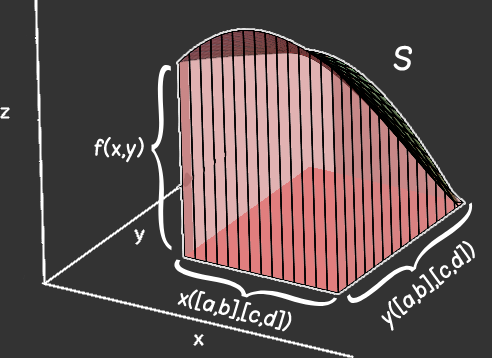
<style>
.page{position:relative;width:492px;height:358px;background:#333333}
.page>*{position:absolute;margin:0}
.t1{font:24px "Blokletters-Viltstift";color:#ffffff}
.t2{font:207.1px "BluuNext-Titling";color:#ffffff;scale:0.5 1}
.t3{font:17px "Blokletters-Viltstift";color:#ffffff}
.t4{font:176px "BluuNext-Titling";color:#ffffff;scale:0.58 1}
.t5{font:186.2px "BluuNext-Titling";color:#ffffff;scale:0.55 1}
</style>
<div class="page">
<p class="t1" style="left:393px;top:45px;width:20px;height:26px">S</p>
<p class="t2" style="left:151px;top:65px;width:21px;height:186px;rotate:28deg">{</p>
<p class="t3" style="left:94px;top:136px;width:50px;height:27px">f(x,y)</p>
<p class="t4" style="left:346px;top:202px;width:128px;height:104px;rotate:-102deg">{</p>
<p class="t3" style="left:381px;top:241px;width:94px;height:90px;rotate:-39deg">y([a,b],[c,d])</p>
<p class="t5" style="left:171px;top:259px;width:167px;height:50px;rotate:-55deg">{</p>
<p class="t3" style="left:177px;top:289px;width:115px;height:43px;rotate:13deg">x([a,b],[c,d])</p>
</div>
